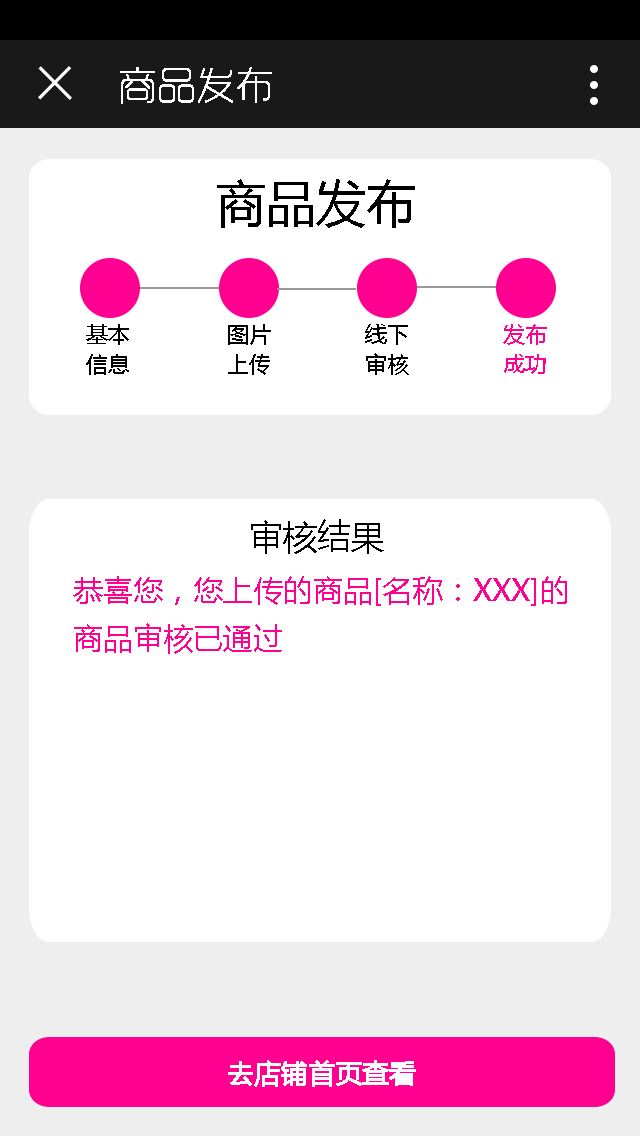
<style>
.page{position:relative;width:640px;height:1136px;background:#ffffff}
.page>*{position:absolute;margin:0}
.t1{font:38px "RTWSYueGoG0v1-ExLight";color:#ffffff;font-weight:bold}
.t2{font:50px "MicrosoftYaHei";color:#000000}
.t3{font:22px/30px "MicrosoftYaHei";color:#000000}
.t4{font:22px/30px "MicrosoftYaHei";color:#ff0090}
.t5{font:34px "MicrosoftYaHei";color:#000000}
.t6{font:30px/48px "MicrosoftYaHei";color:#ff0090}
.t7{font:26px "MicrosoftYaHei";color:#ffffff;font-weight:bold}
</style>
<div class="page">
<p class="t1" style="left:120px;top:67px;width:152px;height:37px">商品发布</p>
<p class="t2" style="left:217px;top:179px;width:198px;height:49px">商品发布</p>
<p class="t3" style="left:86px;top:324px;width:43px;height:51px">基本<br>信息</p>
<p class="t3" style="left:228px;top:324px;width:43px;height:51px">图片<br>上传</p>
<p class="t3" style="left:365px;top:324px;width:44px;height:51px">线下<br>审核</p>
<p class="t4" style="left:503px;top:324px;width:44px;height:50px">发布<br>成功</p>
<p class="t5" style="left:251px;top:519px;width:133px;height:35px">审核结果</p>
<p class="t6" style="left:73px;top:576px;width:494px;height:78px">恭喜您，您上传的商品[名称：XXX]的<br>商品审核已通过</p>
<p class="t7" style="left:228px;top:1060px;width:188px;height:27px">去店铺首页查看</p>
</div>
